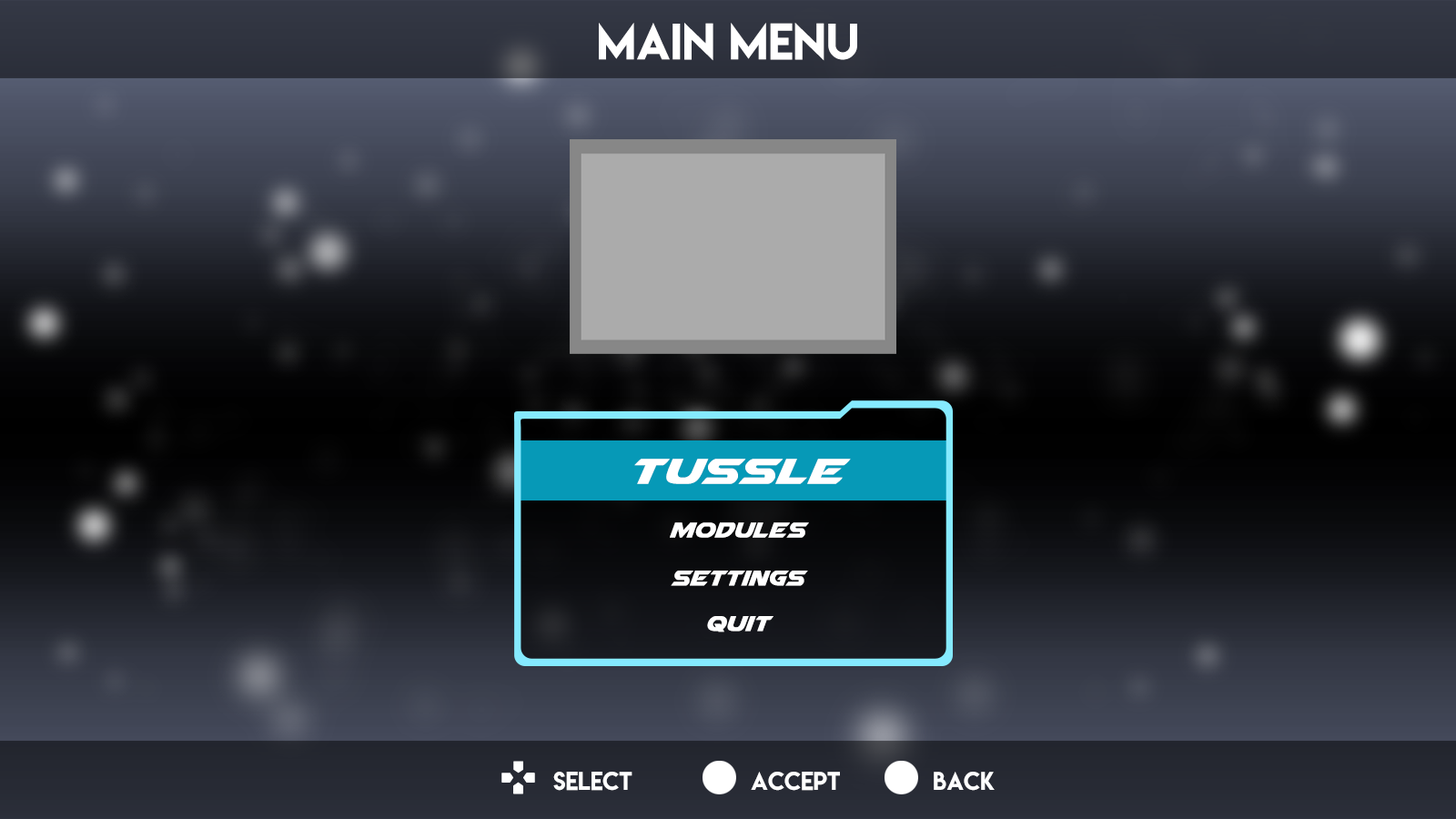
<style>
.page{position:relative;width:1456px;height:819px}
.page>*{position:absolute;margin:0}
.t1{font:45.5px "LemonMilk";color:#ffffff}
.t2{font:47.4px "AirstrikeExpanded";color:#ffffff}
.t3{font:28.4px "Airstrike";color:#ffffff}
.t4{font:22.7px "LemonMilk";color:#ffffff}
</style>
<div class="page">
<p class="t1" style="left:599px;top:23px;width:258px;height:38px">MAIN MENU</p>
<p class="t2" style="left:634px;top:459px;width:217px;height:25px">TUSSLE</p>
<p class="t3" style="left:670px;top:522px;width:139px;height:16px">Modules</p>
<p class="t3" style="left:671px;top:571px;width:137px;height:15px">Settings</p>
<p class="t3" style="left:707px;top:616px;width:66px;height:16px">Quit</p>
<p class="t4" style="left:553px;top:772px;width:79px;height:19px">SELECT</p>
<p class="t4" style="left:751px;top:772px;width:89px;height:19px">ACCEPT</p>
<p class="t4" style="left:934px;top:772px;width:61px;height:19px">BACK</p>
</div>
